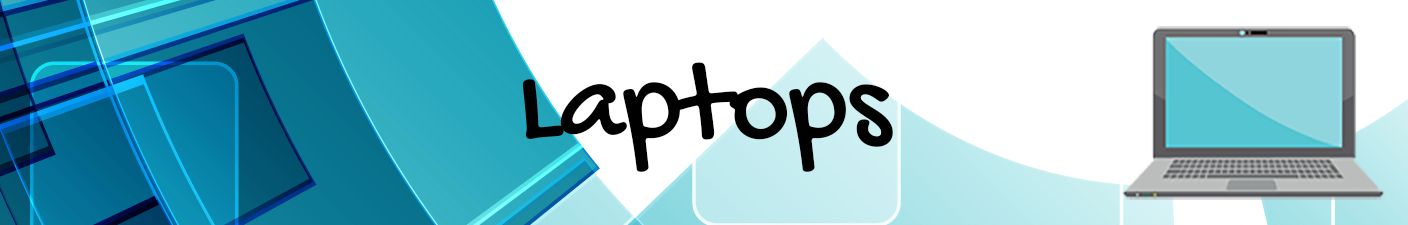
<style>
.page{position:relative;width:1408px;height:225px;background:#ffffff}
.page>*{position:absolute;margin:0}
.t1{font:116.7px "GochiHand-Regular";color:#000000}
</style>
<div class="page">
<p class="t1" style="left:522px;top:62px;width:371px;height:110px">Laptops</p>
</div>
